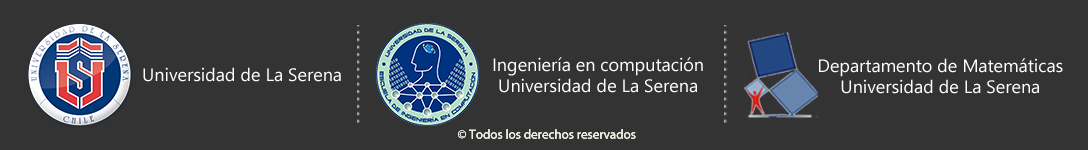
<style>
.page{position:relative;width:1088px;height:150px;background:#333333}
.page>*{position:absolute;margin:0}
.t1{font:18px "SegoeUI";color:#ffffff}
</style>
<div class="page">
<p class="t1" style="left:493px;top:57px;width:210px;height:36px;text-align:center">Ingeniería en computación<br>Universidad de La Serena</p>
<p class="t1" style="left:819px;top:58px;width:244px;height:36px;text-align:center">Departamento de Matemáticas<br>Universidad de La Serena</p>
<p class="t1" style="left:143px;top:67px;width:198px;height:15px">Universidad de La Serena</p>
</div>
